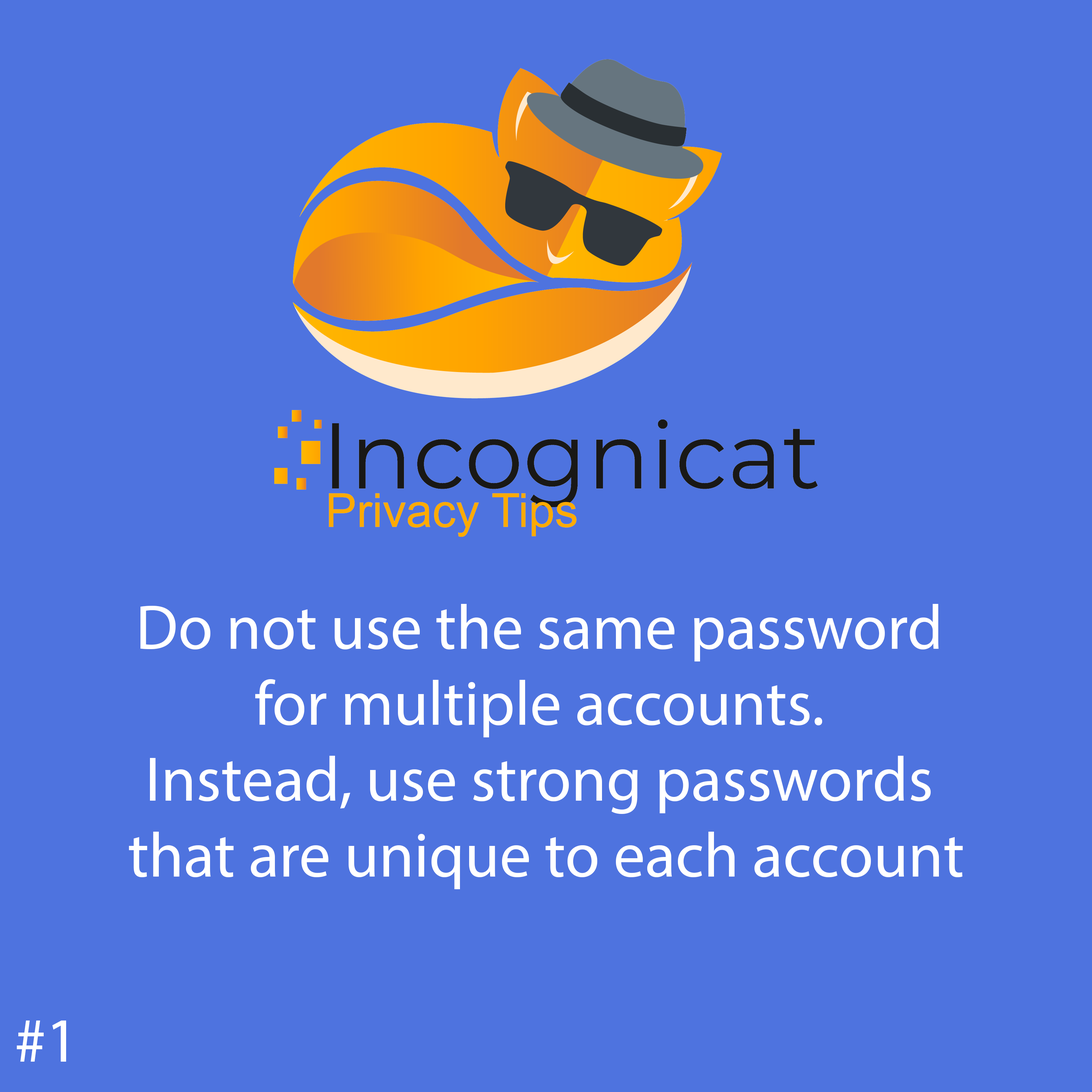
<style>
.page{position:relative;width:1092px;height:1092px;background:#4e73df}
.page>*{position:absolute;margin:0}
.t1{font:63.3px "MyriadPro-Regular";color:#ffffff}
</style>
<div class="page">
<p class="t1" style="left:129px;top:604px;width:834px;height:285px;text-align:center">Do not use the same password<br> for multiple accounts. <br>Instead, use strong passwords<br> that are unique to each account</p>
<p class="t1" style="left:17px;top:1020px;width:49px;height:42px">#1</p>
</div>
